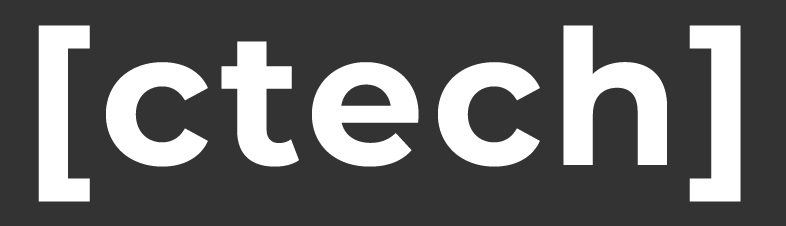
<style>
.page{position:relative;width:786px;height:226px;background:#333333}
.page>*{position:absolute;margin:0}
.t1{font:188px "Montserrat-Bold";letter-spacing:0.04em;color:#ffffff}
</style>
<div class="page">
<p class="t1" style="left:38px;top:25px;width:703px;height:177px">[ctech]</p>
</div>
